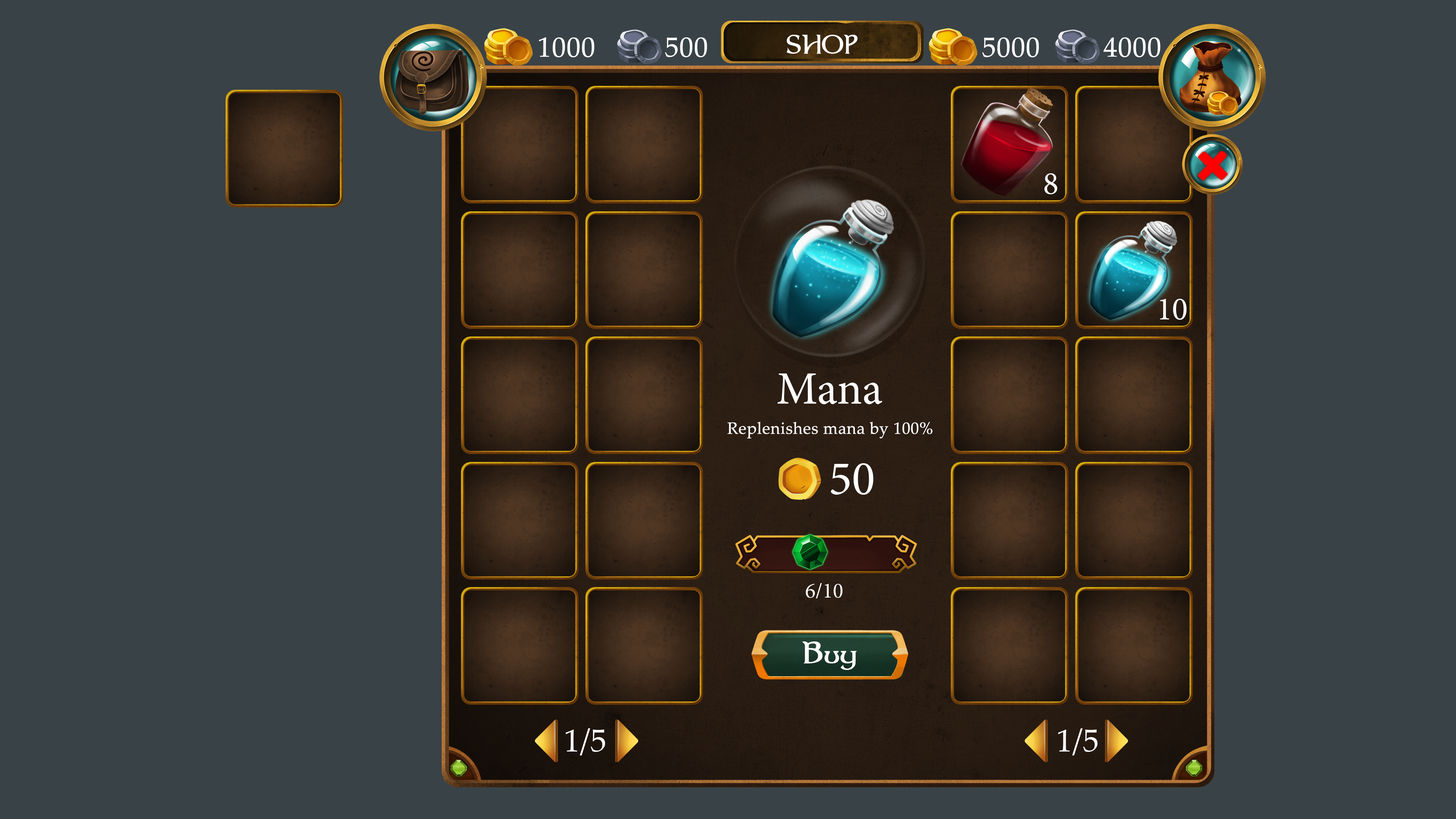
<style>
.page{position:relative;width:1456px;height:819px;background:#394247}
.page>*{position:absolute;margin:0}
.t1{font:27.8px "PalatinoLinotype-Roman";color:#ffffff;font-weight:bold}
.t2{font:30.8px "Dumbledor1";color:#fefefe}
.t3{font:32.8px "MinionPro-Regular";color:#fefefe}
.t4{font:46.5px "MinionPro-Regular";color:#fefefe}
.t5{font:16.4px "PalatinoLinotype-Roman";color:#ffffff;font-weight:bold}
.t6{font:48.4px "MinionPro-Regular";color:#fefefe}
.t7{font:21.5px "MinionPro-Regular";color:#fefefe}
.t8{font:35.8px "Dumbledor1";color:#ffffff;scale:1.17 1}
.t9{font:32.1px "PalatinoLinotype-Roman";color:#fefefe}
</style>
<div class="page">
<p class="t1" style="left:539px;top:37px;width:55px;height:20px">1000</p>
<p class="t1" style="left:665px;top:37px;width:42px;height:20px">500</p>
<p class="t2" style="left:787px;top:35px;width:71px;height:19px">SHOP</p>
<p class="t1" style="left:983px;top:37px;width:56px;height:20px">5000</p>
<p class="t1" style="left:1104px;top:37px;width:57px;height:20px">4000</p>
<p class="t3" style="left:1045px;top:173px;width:13px;height:21px">8</p>
<p class="t3" style="left:1160px;top:298px;width:27px;height:22px">10</p>
<p class="t4" style="left:777px;top:373px;width:106px;height:31px">Mana</p>
<p class="t5" style="left:728px;top:421px;width:205px;height:18px">Replenishes mana by 100%</p>
<p class="t6" style="left:831px;top:463px;width:43px;height:32px">50</p>
<p class="t7" style="left:806px;top:583px;width:37px;height:15px">6/10</p>
<p class="t8" style="left:803px;top:641px;width:54px;height:29px">Buy</p>
<p class="t9" style="left:566px;top:728px;width:39px;height:27px">1/5</p>
<p class="t9" style="left:1058px;top:728px;width:40px;height:27px">1/5</p>
</div>
